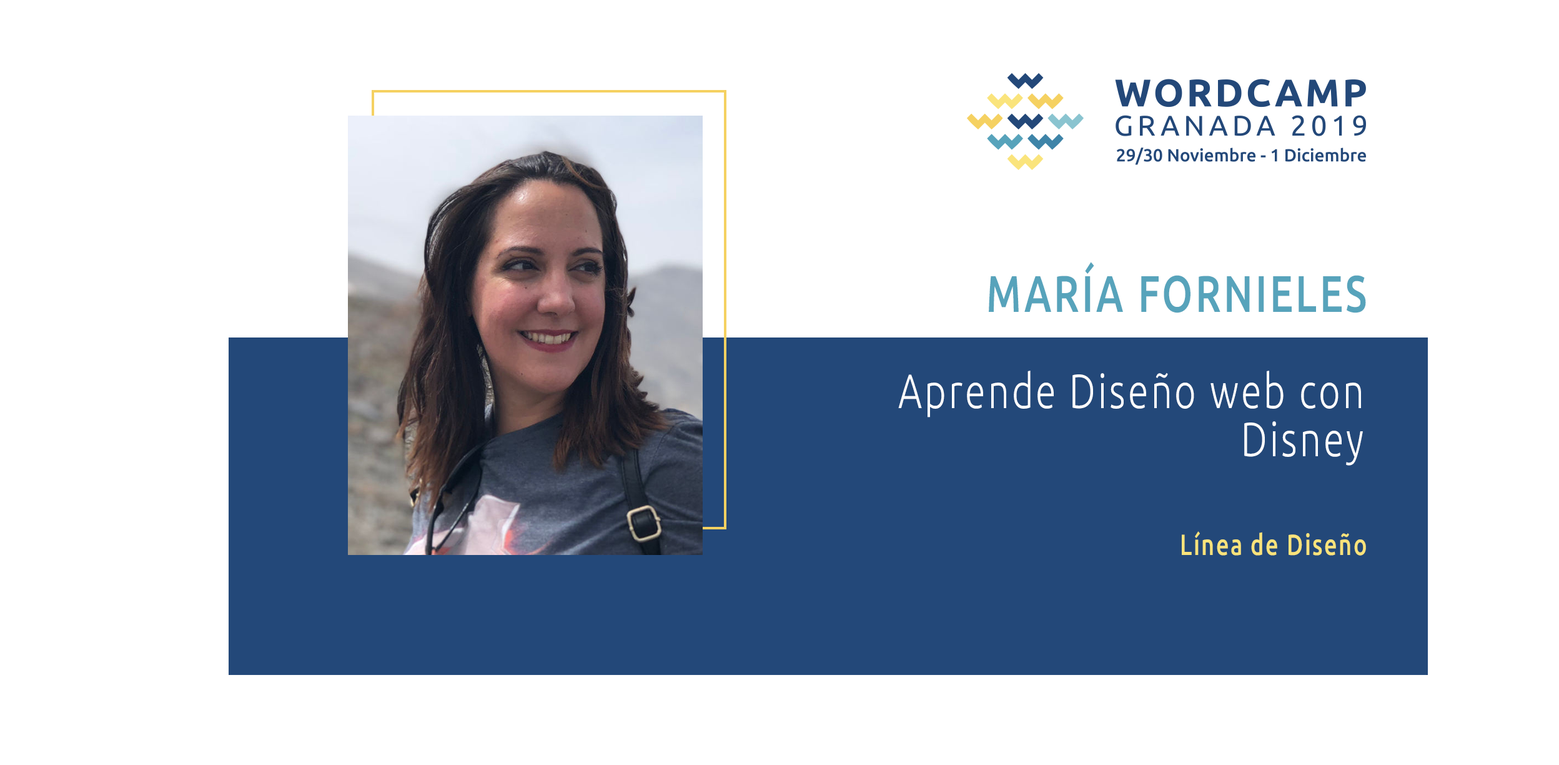
<style>
.page{position:relative;width:1559px;height:765px;background:#ffffff}
.page>*{position:absolute;margin:0}
.t1{font:51.4px "Ubuntu-Medium";letter-spacing:0.068em;color:#57a3bb;text-transform:uppercase;scale:0.77 1}
.t2{font:48.2px/48.2px "Ubuntu-Light";letter-spacing:0.068em;color:#ffffff;scale:0.77 1}
.t3{font:29.2px "Ubuntu-Medium";letter-spacing:0.068em;color:#f9e37b;scale:0.77 1}
</style>
<div class="page">
<p class="t1" style="left:989px;top:262px;width:377px;height:51px">María Fornieles</p>
<p class="t2" style="left:898px;top:370px;width:465px;height:95px;text-align:right">Aprende Diseño web con Disney</p>
<p class="t3" style="left:1182px;top:531px;width:184px;height:24px">Línea de Diseño</p>
</div>
